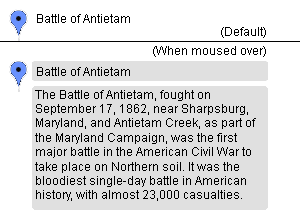
<style>
.page{position:relative;width:300px;height:220px;background:#ffffff}
.page>*{position:absolute;margin:0}
.t1{font:12px "ArialMT";color:#000000}
</style>
<div class="page">
<p class="t1" style="left:37px;top:14px;width:93px;height:9px">Battle of Antietam</p>
<p class="t1" style="left:221px;top:27px;width:45px;height:11px">(Default)</p>
<p class="t1" style="left:153px;top:46px;width:113px;height:11px">(When moused over)</p>
<p class="t1" style="left:37px;top:67px;width:93px;height:9px">Battle of Antietam</p>
<p class="t1" style="left:35px;top:90px;width:221px;height:111px">The Battle of Antietam, fought on September 17, 1862, near Sharpsburg, Maryland, and Antietam Creek, as part of the Maryland Campaign, was the first major battle in the American Civil War to take place on Northern soil. It was the bloodiest single-day battle in American history, with almost 23,000 casualties.</p>
</div>
